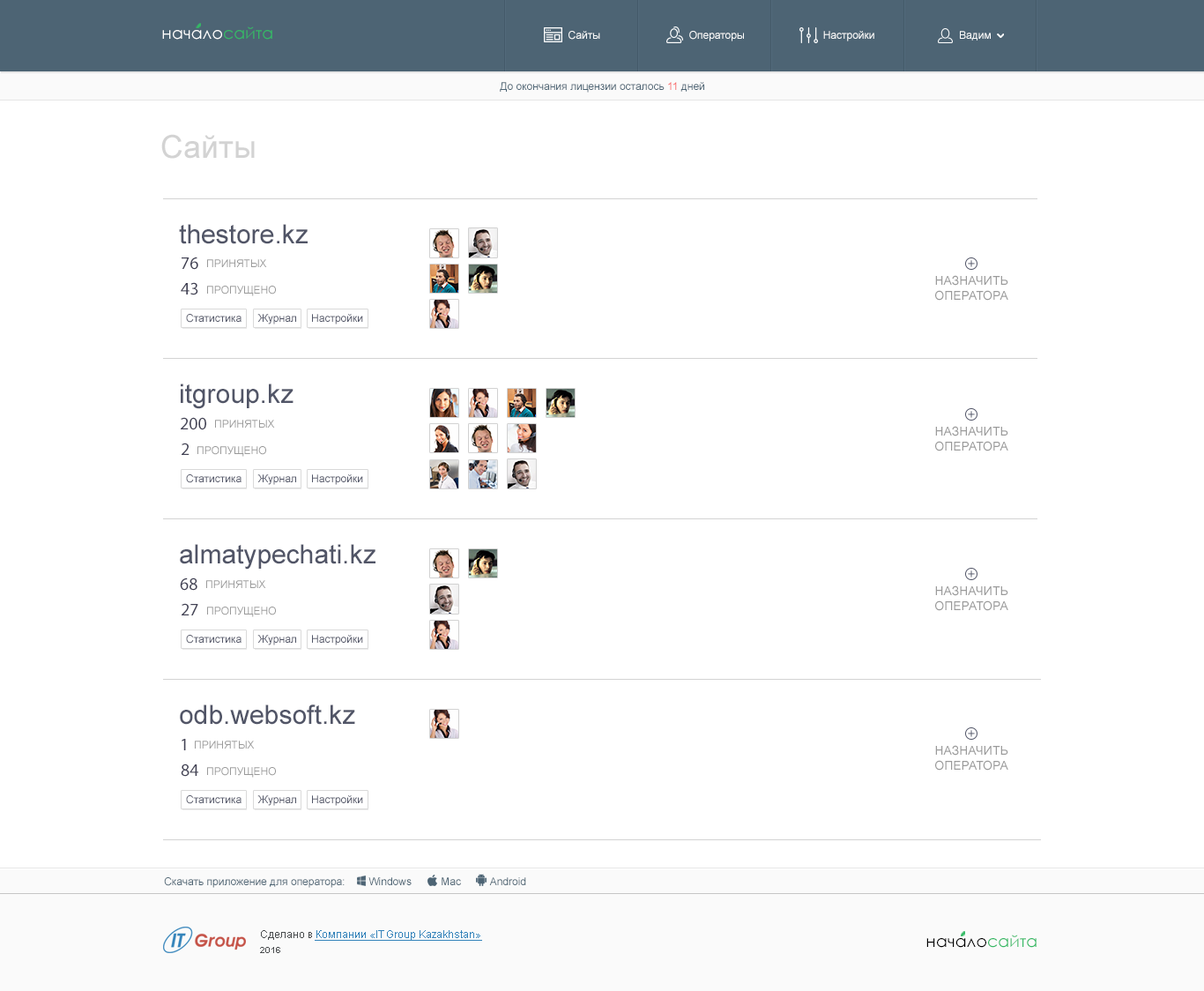
<style>
.page{position:relative;width:1204px;height:991px;background:#ffffff}
.page>*{position:absolute;margin:0}
.t1{font:16.4px "CenturyGothic";color:#ffffff}
.t2{font:16.4px "CenturyGothic";color:#34ba65}
.t3{font:10.6px "ArialMT";color:#ffffff}
.t4{font:10.6px "ArialMT";color:#4d6474}
.t5{font:10.6px "ArialMT";color:#f96969}
.t6{font:31.7px "ArialMT";color:#d3d3d3}
.t7{font:26.4px "ArialMT";color:#515567}
.t8{font:17.6px "MyriadPro-Regular";color:#424255}
.t9{font:10.6px "ArialMT";color:#9a9a9a}
.t10{font:12.3px "ArialMT";color:#9a9a9a}
.t11{font:10.6px "ArialMT";color:#515567}
.t12{font:10.6px "ArialMT";color:#3483ba;text-decoration:underline}
.t13{font:10.6px "ArialMT";color:#4a4d4f}
.t14{font:16.4px "CenturyGothic";color:#000000}
.t15{font:8.8px "Arial-BoldMT";color:#4a4d4f}
</style>
<div class="page">
<p class="t1" style="left:162px;top:26px;width:110px;height:14px">начало<span class="t2">сайта</span></p>
<p class="t3" style="left:568px;top:31px;width:32px;height:9px">Сайты</p>
<p class="t3" style="left:689px;top:31px;width:55px;height:10px">Операторы</p>
<p class="t3" style="left:823px;top:31px;width:51px;height:10px">Настройки</p>
<p class="t3" style="left:960px;top:31px;width:31px;height:10px">Вадим</p>
<p class="t4" style="left:500px;top:82px;width:204px;height:11px">До окончания лицензии осталось <span class="t5">11</span> дней</p>
<p class="t6" style="left:161px;top:134px;width:94px;height:25px">Сайты</p>
<p class="t7" style="left:179px;top:224px;width:129px;height:20px">thestore.kz</p>
<p class="t8" style="left:182px;top:256px;width:16px;height:14px">76</p>
<p class="t9" style="left:207px;top:259px;width:60px;height:8px">ПРИНЯТЫХ</p>
<p class="t10" style="left:935px;top:275px;width:73px;height:26px;text-align:center">НАЗНАЧИТЬ<br>ОПЕРАТОРА</p>
<p class="t8" style="left:181px;top:282px;width:17px;height:13px">43</p>
<p class="t9" style="left:207px;top:286px;width:69px;height:10px">ПРОПУЩЕНО</p>
<p class="t11" style="left:186px;top:314px;width:55px;height:9px">Статистика</p>
<p class="t11" style="left:257px;top:314px;width:39px;height:10px">Журнал</p>
<p class="t11" style="left:312px;top:314px;width:51px;height:10px">Настройки</p>
<p class="t7" style="left:181px;top:383px;width:112px;height:26px">itgroup.kz</p>
<p class="t8" style="left:181px;top:417px;width:25px;height:13px">200</p>
<p class="t9" style="left:215px;top:419px;width:60px;height:8px">ПРИНЯТЫХ</p>
<p class="t10" style="left:935px;top:426px;width:73px;height:25px;text-align:center">НАЗНАЧИТЬ<br>ОПЕРАТОРА</p>
<p class="t8" style="left:182px;top:442px;width:7px;height:13px">2</p>
<p class="t9" style="left:197px;top:446px;width:69px;height:10px">ПРОПУЩЕНО</p>
<p class="t11" style="left:186px;top:474px;width:55px;height:9px">Статистика</p>
<p class="t11" style="left:257px;top:474px;width:39px;height:11px">Журнал</p>
<p class="t11" style="left:312px;top:474px;width:51px;height:11px">Настройки</p>
<p class="t7" style="left:180px;top:544px;width:195px;height:25px">almatypechati.kz</p>
<p class="t8" style="left:180px;top:577px;width:17px;height:13px">68</p>
<p class="t9" style="left:206px;top:580px;width:60px;height:8px">ПРИНЯТЫХ</p>
<p class="t10" style="left:935px;top:585px;width:73px;height:26px;text-align:center">НАЗНАЧИТЬ<br>ОПЕРАТОРА</p>
<p class="t8" style="left:182px;top:603px;width:16px;height:12px">27</p>
<p class="t9" style="left:207px;top:606px;width:69px;height:11px">ПРОПУЩЕНО</p>
<p class="t11" style="left:186px;top:635px;width:55px;height:8px">Статистика</p>
<p class="t11" style="left:257px;top:635px;width:39px;height:10px">Журнал</p>
<p class="t11" style="left:312px;top:635px;width:51px;height:10px">Настройки</p>
<p class="t7" style="left:180px;top:704px;width:175px;height:20px">odb.websoft.kz</p>
<p class="t8" style="left:182px;top:739px;width:4px;height:11px">1</p>
<p class="t9" style="left:195px;top:740px;width:60px;height:8px">ПРИНЯТЫХ</p>
<p class="t10" style="left:935px;top:745px;width:73px;height:25px;text-align:center">НАЗНАЧИТЬ<br>ОПЕРАТОРА</p>
<p class="t8" style="left:181px;top:763px;width:17px;height:13px">84</p>
<p class="t9" style="left:207px;top:767px;width:69px;height:10px">ПРОПУЩЕНО</p>
<p class="t11" style="left:186px;top:795px;width:55px;height:9px">Статистика</p>
<p class="t11" style="left:257px;top:795px;width:39px;height:10px">Журнал</p>
<p class="t11" style="left:312px;top:795px;width:51px;height:10px">Настройки</p>
<p class="t4" style="left:164px;top:877px;width:362px;height:10px">Скачать приложение для оператора:        Windows          Mac          Android</p>
<p class="t12" style="left:261px;top:930px;width:221px;height:10px"><span class="t13">Сделано в </span>Компании «IT Group Kazakhstan»</p>
<p class="t14" style="left:926px;top:934px;width:110px;height:13px">начало<span class="t2">сайта</span></p>
<p class="t15" style="left:260px;top:946px;width:20px;height:7px">2016</p>
</div>
